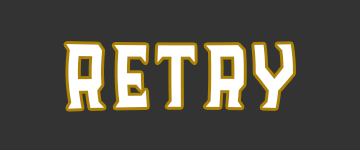
<style>
.page{position:relative;width:360px;height:150px;background:#333333}
.page>*{position:absolute;margin:0}
.t1{font:93.8px "Lorde-Havana";letter-spacing:0.1em;color:#ffffff;scale:0.75 1}
</style>
<div class="page">
<p class="t1" style="left:66px;top:44px;width:227px;height:65px">RETRY</p>
</div>
